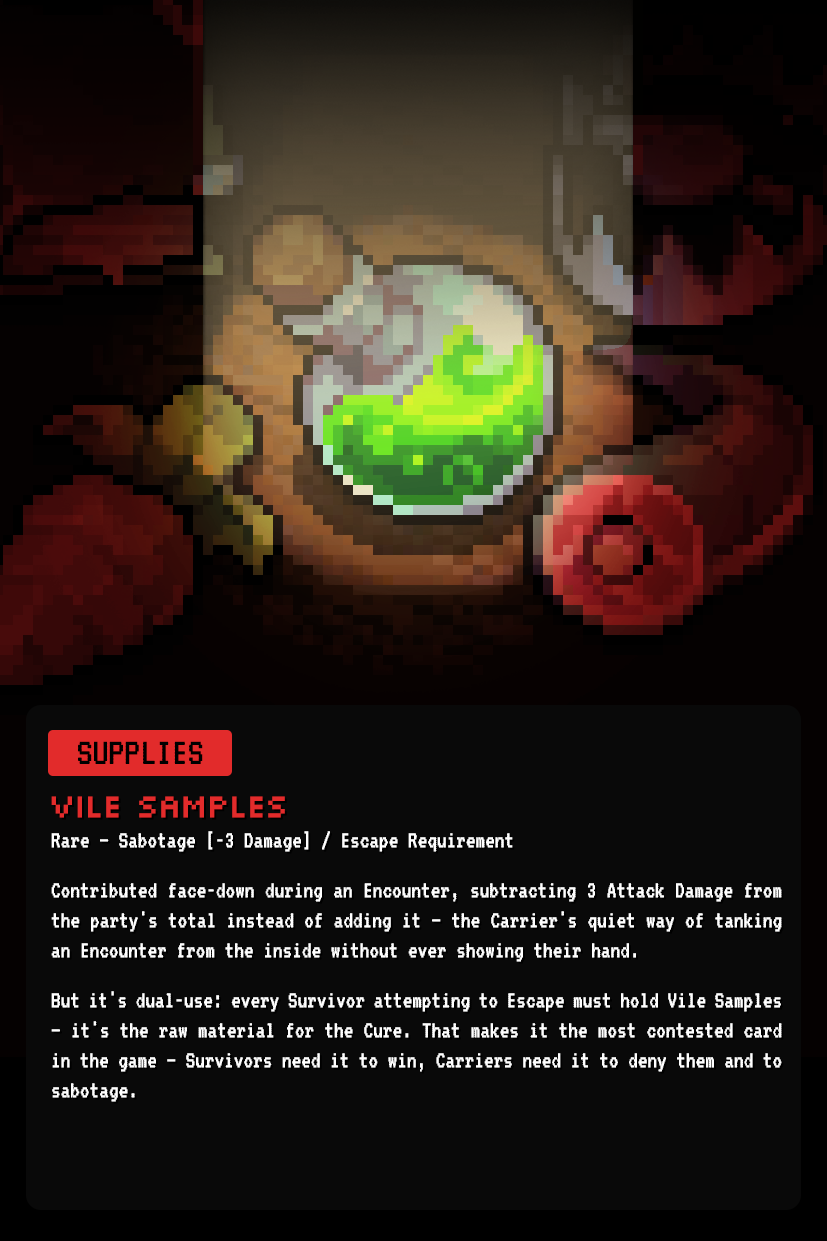
<style>
.page{position:relative;width:827px;height:1241px;background:#090909}
.page>*{position:absolute;margin:0}
.t1{font:39.7px "VT323-Regular";color:#000000}
.t2{font:25px "VT323-Regular";color:#ffffff;scale:0.96 1}
.t3{font:33.3px "Silkscreen-Regular";letter-spacing:-0.05em;color:#e22b2b;scale:0.96 1}
</style>
<div class="page">
<p class="t1" style="left:78px;top:741px;width:125px;height:23px">SUPPLIES</p>
<p class="t2" style="left:51px;top:796px;width:731px;height:306px;text-align:justify"><span class="t3">VILE SAMPLES<br></span>Rare — Sabotage [-3 Damage] / Escape Requirement<br><br>Contributed face-down during an Encounter, subtracting 3 Attack Damage from the party's total instead of adding it — the Carrier's quiet way of tanking an Encounter from the inside without ever showing their hand.<br><br>But it's dual-use: every Survivor attempting to Escape must hold Vile Samples — it's the raw material for the Cure. That makes it the most contested card in the game — Survivors need it to win, Carriers need it to deny them and to sabotage.</p>
</div>
